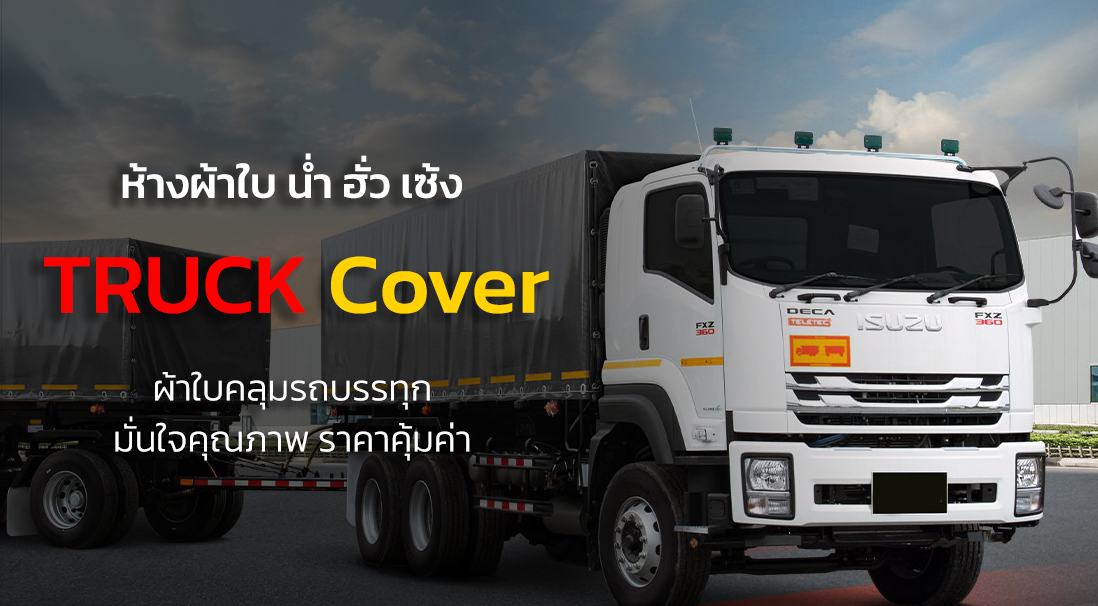
<style>
.page{position:relative;width:1098px;height:606px}
.page>*{position:absolute;margin:0}
.t1{font:43.6px "Kanit-Medium";color:#ffffff}
.t2{font:85.9px "Kanit-Medium";color:#fe0000}
.t3{font:85.9px "Kanit-Medium";color:#ffd200}
.t4{font:36.4px "Kanit-Light";color:#ffffff}
</style>
<div class="page">
<p class="t1" style="left:122px;top:153px;width:340px;height:46px">ห้างผ้าใบ น่ำ ฮั่ว เซ้ง</p>
<p class="t2" style="left:44px;top:256px;width:505px;height:58px">TRUCK <span class="t3">Cover</span></p>
<p class="t4" style="left:115px;top:371px;width:355px;height:90px;text-align:center">ผ้าใบคลุมรถบรรทุก<br><br>มั่นใจคุณภาพ ราคาคุ้มค่า</p>
</div>
